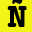
<style>
.page{position:relative;width:32px;height:32px;background:#f3f315}
.page>*{position:absolute;margin:0}
.t1{font:32px "AmericanTypewriter-CondensedBold";color:#000000}
</style>
<div class="page">
<p class="t1" style="left:7px;top:0px;width:20px;height:27px">Ñ</p>
</div>
